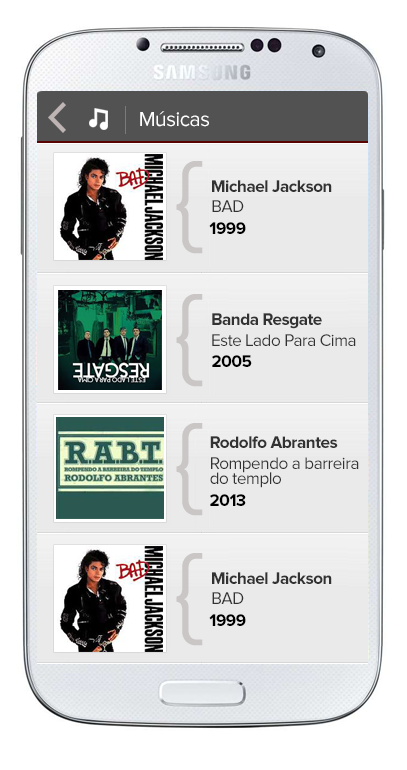
<style>
.page{position:relative;width:407px;height:770px;background:#ffffff}
.page>*{position:absolute;margin:0}
.t1{font:21.1px "ProximaNova-Regular";letter-spacing:-0.025em;color:#ffffff}
.t2{font:106.4px "ProximaNova-Regular";letter-spacing:-0.025em;color:#cac6c6}
.t3{font:17.2px "ProximaNova-Bold";letter-spacing:-0.025em;color:#333232}
.t4{font:17.2px "ProximaNova-Regular";letter-spacing:-0.025em;color:#333232}
.t5{font:17.2px "ProximaNova-Bold";letter-spacing:-0.025em;color:#000000}
.t6{font:17.2px/15px "ProximaNova-Regular";letter-spacing:-0.025em;color:#333232}
</style>
<div class="page">
<p class="t1" style="left:140px;top:111px;width:69px;height:16px">Músicas</p>
<p class="t2" style="left:176px;top:161px;width:27px;height:93px">{</p>
<p class="t3" style="left:212px;top:180px;width:120px;height:12px">Michael Jackson</p>
<p class="t4" style="left:212px;top:200px;width:32px;height:12px">BAD</p>
<p class="t5" style="left:209px;top:222px;width:37px;height:12px">1999</p>
<p class="t2" style="left:176px;top:294px;width:27px;height:93px">{</p>
<p class="t3" style="left:212px;top:313px;width:110px;height:16px">Banda Resgate</p>
<p class="t4" style="left:212px;top:334px;width:144px;height:12px">Este Lado Para Cima</p>
<p class="t5" style="left:212px;top:355px;width:40px;height:12px">2005</p>
<p class="t2" style="left:176px;top:423px;width:27px;height:93px">{</p>
<p class="t3" style="left:210px;top:436px;width:128px;height:12px">Rodolfo Abrantes</p>
<p class="t6" style="left:210px;top:457px;width:149px;height:31px">Rompendo a barreira <br>do templo</p>
<p class="t5" style="left:210px;top:494px;width:36px;height:12px">2013</p>
<p class="t2" style="left:176px;top:553px;width:27px;height:93px">{</p>
<p class="t3" style="left:212px;top:572px;width:120px;height:12px">Michael Jackson</p>
<p class="t4" style="left:212px;top:592px;width:32px;height:12px">BAD</p>
<p class="t5" style="left:209px;top:614px;width:37px;height:12px">1999</p>
</div>
